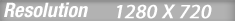
<style>
.page{position:relative;width:235px;height:21px;background:#b2b2b2}
.page>*{position:absolute;margin:0}
.t1{font:20px "HelveticaNeueLTPro-BdCnO";color:#ffffff}
.t2{font:20px "MyriadPro-Regular";color:#ffffff;font-weight:bold;font-style:italic}
</style>
<div class="page">
<p class="t1" style="left:4px;top:2px;width:84px;height:16px">Resolution</p>
<p class="t2" style="left:117px;top:4px;width:95px;height:15px">1280 X 720</p>
</div>
